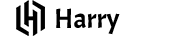
<style>
.page{position:relative;width:176px;height:38px;background:#ffffff}
.page>*{position:absolute;margin:0}
.t1{font:48px "Acme-Regular";color:#000000}
</style>
<div class="page">
<p class="t1" style="left:56px;top:8px;width:64px;height:27px">Harry</p>
</div>
